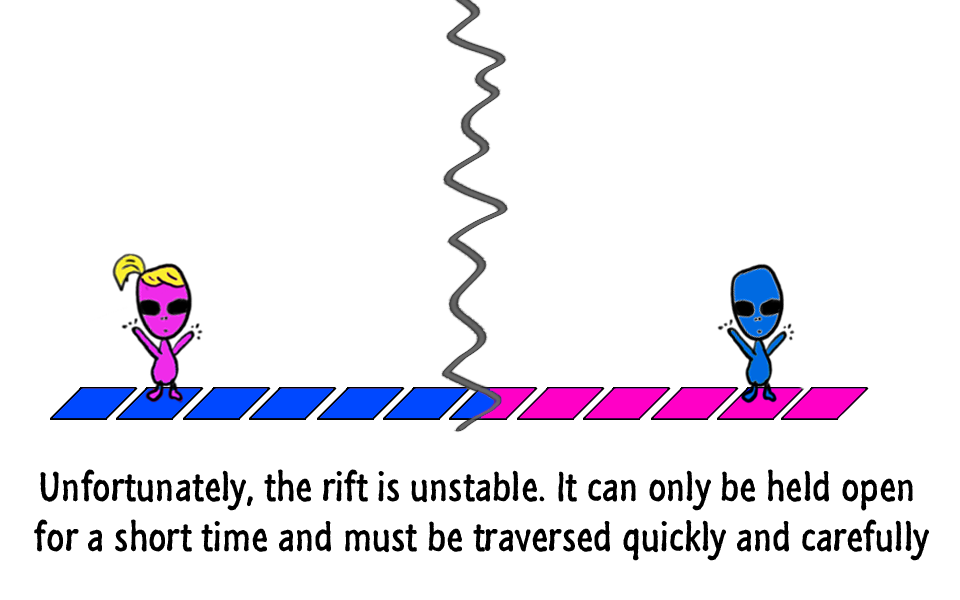
<style>
.page{position:relative;width:960px;height:600px;background:#ffffff}
.page>*{position:absolute;margin:0}
.t1{font:42px "SegoeMarker";color:#000000}
</style>
<div class="page">
<p class="t1" style="left:34px;top:469px;width:895px;height:92px;text-align:center">Unfortunately, the rift is unstable. It can only be held open <br>for a short time and must be traversed quickly and carefully</p>
</div>
